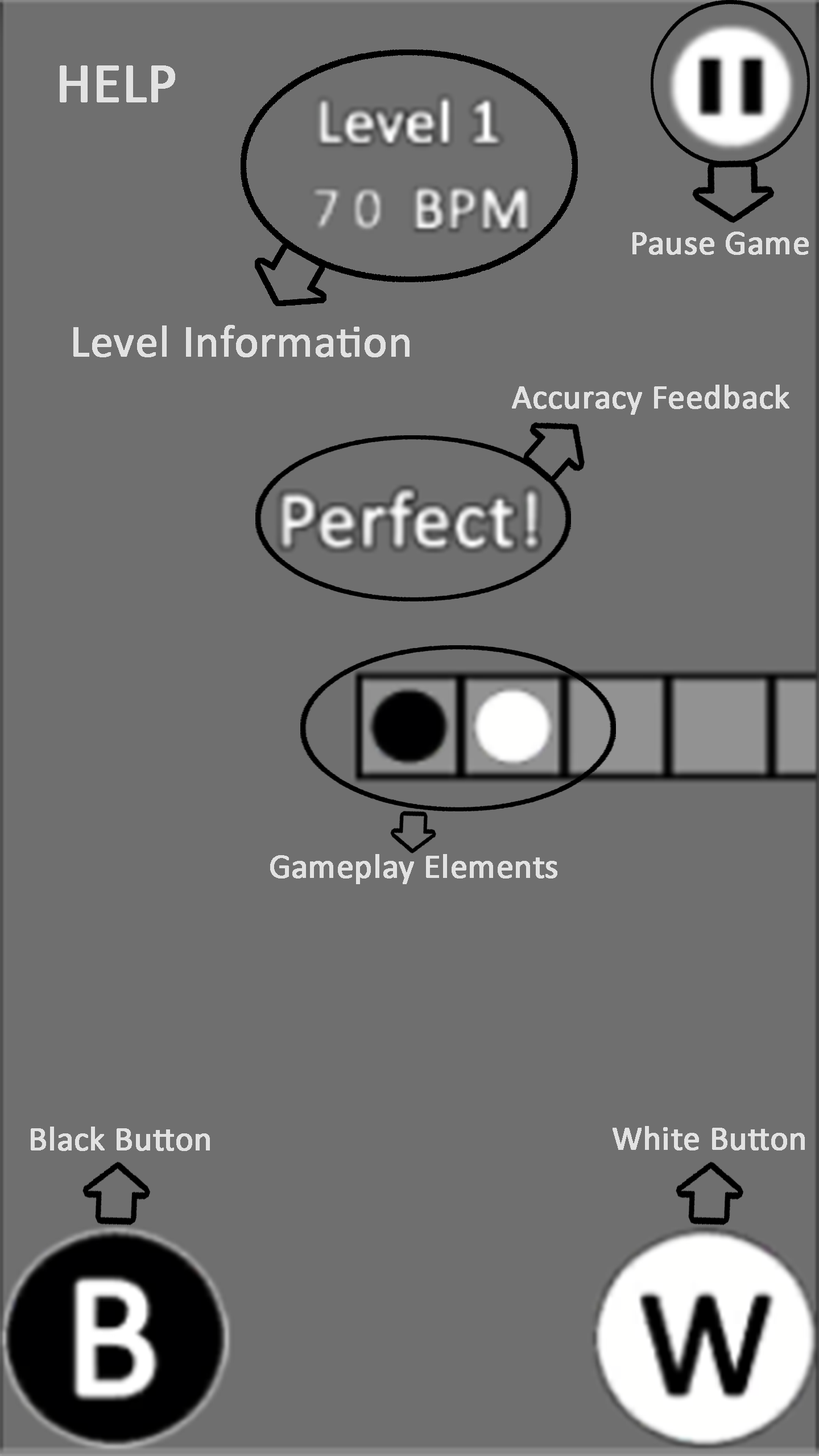
<style>
.page{position:relative;width:819px;height:1456px;background:#6f6f6f}
.page>*{position:absolute;margin:0}
.t1{font:56.9px "Calibri";color:#e2e2e2;font-weight:bold}
.t2{font:34.1px "Calibri";color:#e2e2e2;font-weight:bold}
.t3{font:45.5px "Calibri";color:#e2e2e2;font-weight:bold}
</style>
<div class="page">
<p class="t1" style="left:60px;top:65px;width:115px;height:37px">HELP</p>
<p class="t2" style="left:633px;top:232px;width:176px;height:23px">Pause Game</p>
<p class="t3" style="left:73px;top:325px;width:337px;height:32px">Level Information</p>
<p class="t2" style="left:512px;top:385px;width:278px;height:30px">Accuracy Feedback</p>
<p class="t2" style="left:270px;top:854px;width:287px;height:30px">Gameplay Elements</p>
<p class="t2" style="left:31px;top:1126px;width:179px;height:25px">Black Button</p>
<p class="t2" style="left:613px;top:1126px;width:192px;height:24px">White Button</p>
</div>
